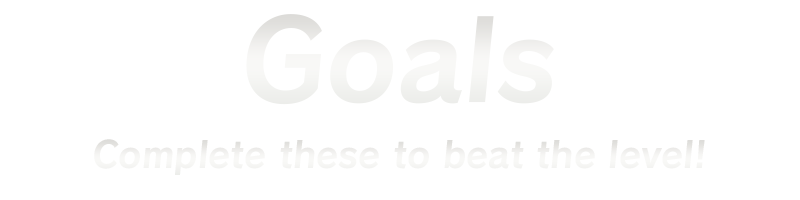
<style>
.page{position:relative;width:800px;height:200px;background:#ffffff}
.page>*{position:absolute;margin:0}
.t1{font:110px "Calamity-Bold";color:#f3f2f0}
.t2{font:36px "Calamity-Bold";color:#f5f5f3}
</style>
<div class="page">
<p class="t1" style="left:246px;top:14px;width:308px;height:91px">Goals</p>
<p class="t2" style="left:94px;top:139px;width:611px;height:36px">Complete these to beat the level!</p>
</div>
